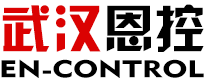
<style>
.page{position:relative;width:205px;height:84px;background:#ffffff}
.page>*{position:absolute;margin:0}
.t1{font:51px "HYk2gj";color:#db0202}
.t2{font:51px "HYk2gj";color:#010101}
.t3{font:23.9px "Geometric415BT-BlackA";color:#000000;scale:1.32 1}
</style>
<div class="page">
<p class="t1" style="left:2px;top:4px;width:202px;height:48px">武汉<span class="t2">恩控</span></p>
<p class="t3" style="left:1px;top:59px;width:203px;height:19px">EN-CONTROL</p>
</div>
